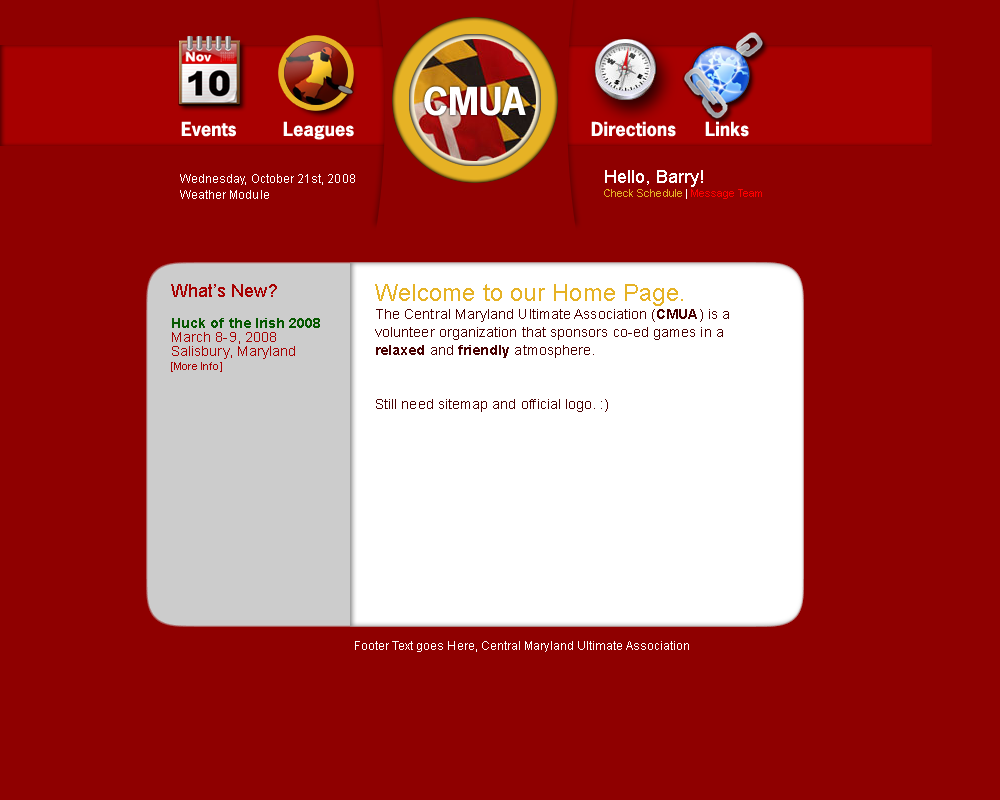
<style>
.page{position:relative;width:1000px;height:800px;background:#8f0000}
.page>*{position:absolute;margin:0}
.t1{font:36px "NewsGothicStd-Bold";letter-spacing:0.005em;color:#ffffff}
.t2{font:18px "NewsGothicStd-Bold";letter-spacing:0.005em;color:#ffffff}
.t3{font:12px "ArialMT";letter-spacing:0.005em;color:#ffffff}
.t4{font:11px/14px "ArialMT";letter-spacing:0.005em;color:#e6b225}
.t5{font:18px/14px "ArialMT";letter-spacing:0.005em;color:#ffffff}
.t6{font:11px/14px "ArialMT";letter-spacing:0.005em;color:#ffffff}
.t7{font:11px/14px "ArialMT";letter-spacing:0.005em;color:#fe0000}
.t8{font:18px "ArialMT";letter-spacing:0.005em;color:#a70000}
.t9{font:14px/18px "ArialMT";letter-spacing:0.005em;color:#480000}
.t10{font:24px/14px "ArialMT";letter-spacing:0.005em;color:#e6b225}
.t11{font:14px/18px "Arial-BoldMT";letter-spacing:0.005em;color:#480000}
.t12{font:14px/14px "ArialMT";letter-spacing:0.005em;color:#a70000}
.t13{font:14px/14px "Arial-BoldMT";letter-spacing:0.005em;color:#065800}
.t14{font:11px/14px "ArialMT";letter-spacing:0.005em;color:#a70000}
</style>
<div class="page">
<p class="t1" style="left:424px;top:86px;width:102px;height:30px">CMUA</p>
<p class="t2" style="left:181px;top:121px;width:55px;height:16px">Events</p>
<p class="t2" style="left:283px;top:121px;width:71px;height:19px">Leagues</p>
<p class="t2" style="left:591px;top:121px;width:85px;height:16px">Directions</p>
<p class="t2" style="left:705px;top:121px;width:44px;height:16px">Links</p>
<p class="t3" style="left:180px;top:174px;width:175px;height:11px">Wednesday, October 21st, 2008</p>
<p class="t4" style="left:604px;top:170px;width:158px;height:29px"><span class="t5">Hello, Barry! <br></span>Check Schedule<span class="t6"> | </span><span class="t7">Message Team</span></p>
<p class="t3" style="left:180px;top:190px;width:89px;height:9px">Weather Module</p>
<p class="t8" style="left:171px;top:284px;width:106px;height:13px">What’s New?</p>
<p class="t9" style="left:375px;top:284px;width:354px;height:128px"><span class="t10">Welcome to our Home Page. <br></span>The Central Maryland Ultimate Association (<span class="t11">CMUA</span>) is a volunteer organization that sponsors co-ed games in a <span class="t11">relaxed </span>and <span class="t11">friendly </span>atmosphere.<br><br><br>Still need sitemap and official logo. :)</p>
<p class="t12" style="left:171px;top:318px;width:149px;height:54px"><span class="t13">Huck of the Irish 2008<br></span>March 8-9, 2008<br>Salisbury, Maryland<br><span class="t14">[More Info]</span></p>
<p class="t3" style="left:355px;top:641px;width:334px;height:11px">Footer Text goes Here, Central Maryland Ultimate Association</p>
</div>
